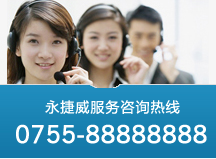
<style>
.page{position:relative;width:216px;height:159px}
.page>*{position:absolute;margin:0}
.t1{font:14px "MicrosoftYaHei";letter-spacing:0.075em;color:#ffffff}
.t2{font:24px "NewsGothicBT-Roman";letter-spacing:0.01em;color:#ffffff;font-weight:bold}
</style>
<div class="page">
<p class="t1" style="left:45px;top:100px;width:135px;height:14px">永捷威服务咨询热线</p>
<p class="t2" style="left:16px;top:124px;width:191px;height:20px">0755-88888888</p>
</div>
